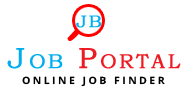
<style>
.page{position:relative;width:187px;height:95px;background:#ffffff}
.page>*{position:absolute;margin:0}
.t1{font:17px "BookmanOldStyle";letter-spacing:0.1em;color:#00aeef;font-variant:small-caps;font-weight:bold}
.t2{font:29px "BookmanOldStyle";letter-spacing:0.1em;color:#ed1c24;font-variant:small-caps;font-weight:bold}
.t3{font:29px "BookmanOldStyle";letter-spacing:0.1em;color:#00aeef;font-variant:small-caps;font-weight:bold}
</style>
<div class="page">
<p class="t1" style="left:76px;top:15px;width:25px;height:13px">JB</p>
<p class="t2" style="left:7px;top:48px;width:174px;height:21px"><span class="t3">Job </span>Portal</p>
</div>
